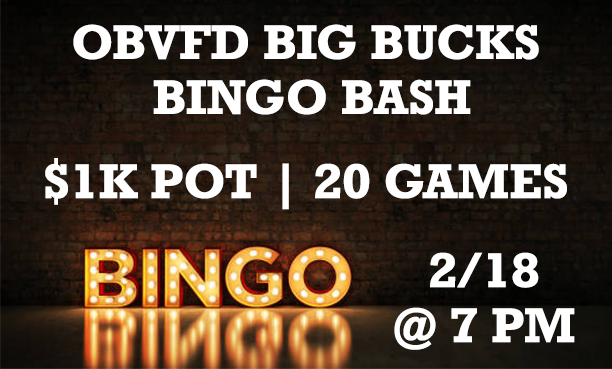
<style>
.page{position:relative;width:612px;height:369px}
.page>*{position:absolute;margin:0}
.t1{font:45.8px "Rockwell-Bold";color:#ffffff}
</style>
<div class="page">
<p class="t1" style="left:73px;top:24px;width:466px;height:91px;text-align:center">OBVFD BIG BUCKS <br>BINGO BASH</p>
<p class="t1" style="left:45px;top:158px;width:522px;height:52px">$1K POT | 20 GAMES</p>
<p class="t1" style="left:394px;top:252px;width:181px;height:98px;text-align:center">2/18<br>@ 7 PM</p>
</div>
